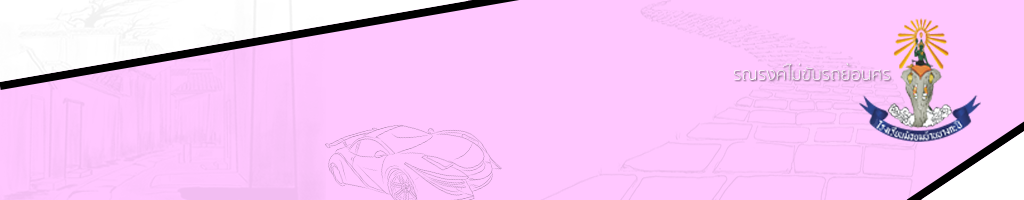
<style>
.page{position:relative;width:1024px;height:200px;background:#ffc7ff}
.page>*{position:absolute;margin:0}
.t1{font:17.3px "SukhumvitSet-Thin";color:#ffffff}
</style>
<div class="page">
<p class="t1" style="left:734px;top:63px;width:156px;height:17px">รณรงค์ไม่ขับรถย้อนศร</p>
</div>
